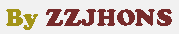
<style>
.page{position:relative;width:179px;height:34px;background:#f1f1f1}
.page>*{position:absolute;margin:0}
.t1{font:24px "CooperBlackStd";color:#772b2b}
.t2{font:24px "CooperBlackStd";color:#a39418}
</style>
<div class="page">
<p class="t1" style="left:6px;top:9px;width:166px;height:21px"><span class="t2">By</span> ZZJHONS</p>
</div>
